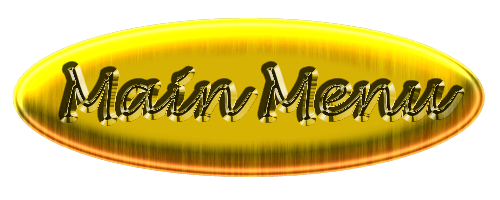
<style>
.page{position:relative;width:500px;height:200px;background:#ffffff}
.page>*{position:absolute;margin:0}
.t1{font:60px "LucidaHandwriting-Italic"}
</style>
<div class="page">
<p class="t1" style="left:64px;top:67px;width:395px;height:53px">Main Menu</p>
</div>
